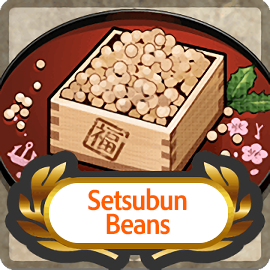
<style>
.page{position:relative;width:270px;height:270px}
.page>*{position:absolute;margin:0}
.t1{font:30px/24px "AdobeClean-Bold";letter-spacing:-0.04em;color:#ff5d00;scale:0.9 1}
</style>
<div class="page">
<p class="t1" style="left:88px;top:188px;width:99px;height:47px;text-align:center">Setsubun<br>Beans</p>
</div>
